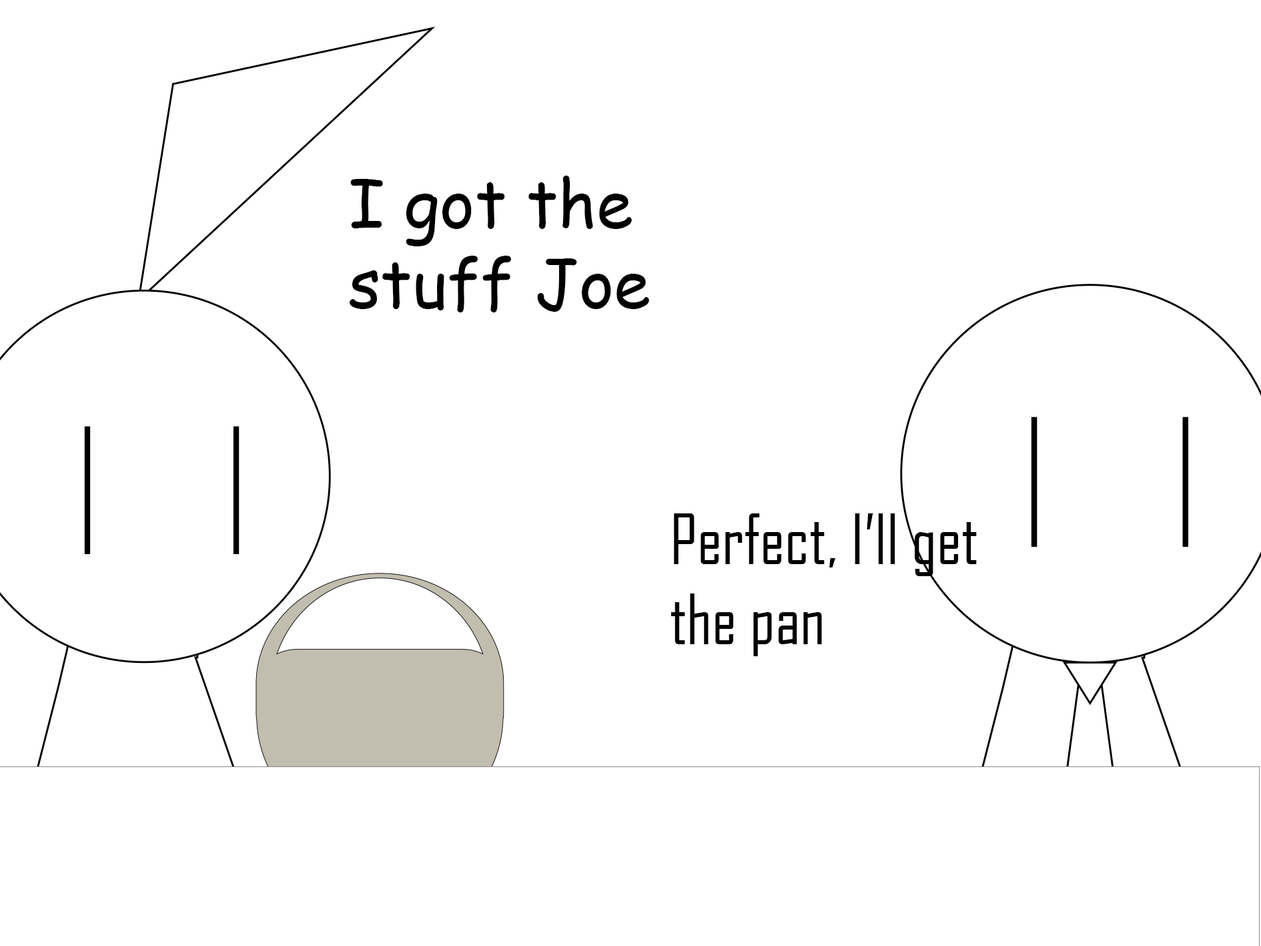
<style>
.page{position:relative;width:1261px;height:946px;background:#ffffff}
.page>*{position:absolute;margin:0}
.t1{font:66.7px "ComicSansMS";color:#000000}
.t2{font:66.7px "AgencyFB-Reg";color:#000000}
</style>
<div class="page">
<p class="t1" style="left:350px;top:175px;width:299px;height:137px">I got the stuff Joe</p>
<p class="t2" style="left:671px;top:513px;width:306px;height:143px">Perfect, I’ll get the pan</p>
</div>
